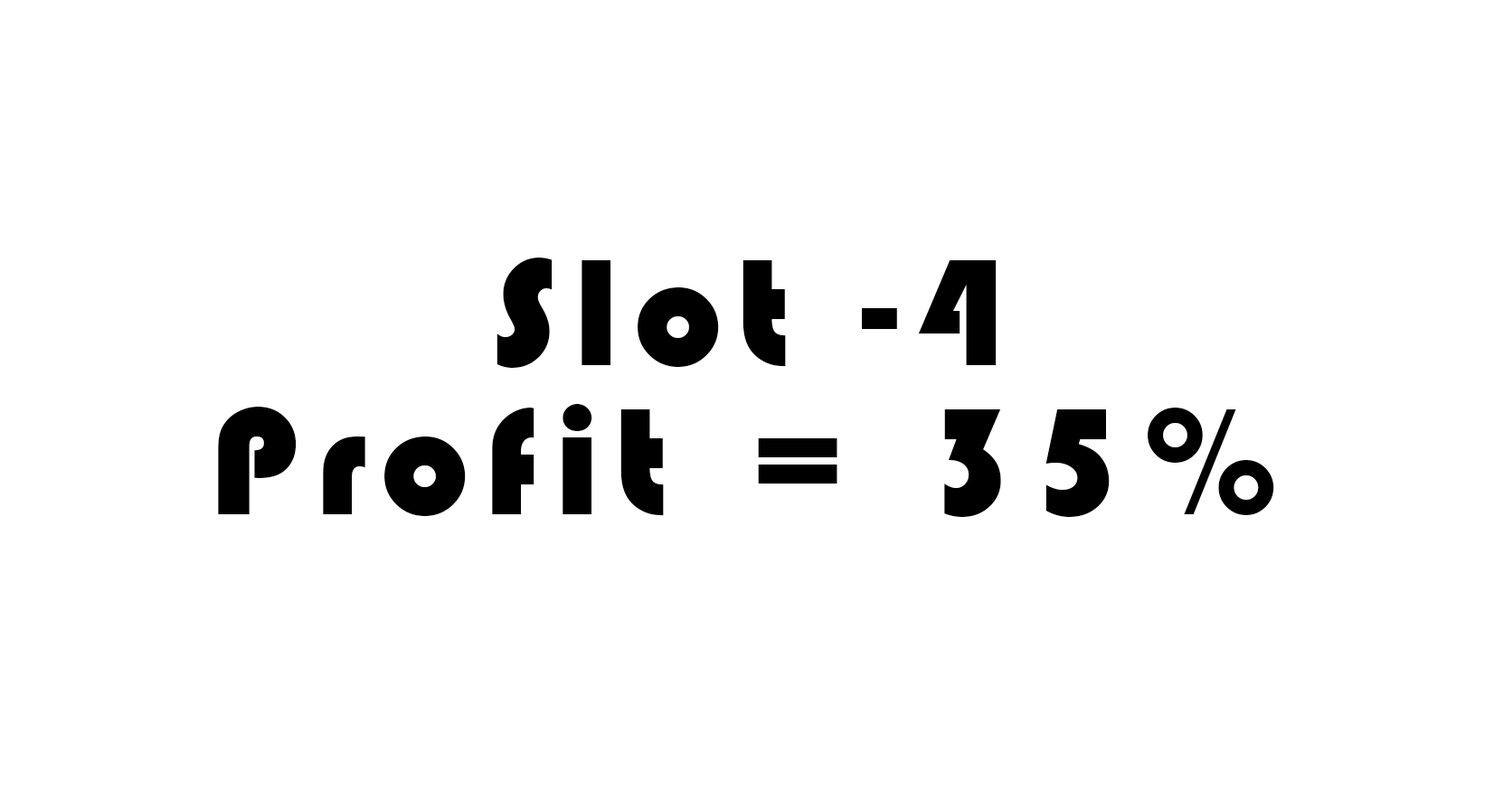
<style>
.page{position:relative;width:1494px;height:798px;background:#ffffff}
.page>*{position:absolute;margin:0}
.t1{font:157.3px/148.8px "Bauhaus93";letter-spacing:0.1em;color:#000000}
</style>
<div class="page">
<p class="t1" style="left:218px;top:258px;width:1056px;height:259px;text-align:center">Slot -4<br>Profit = 35%</p>
</div>
